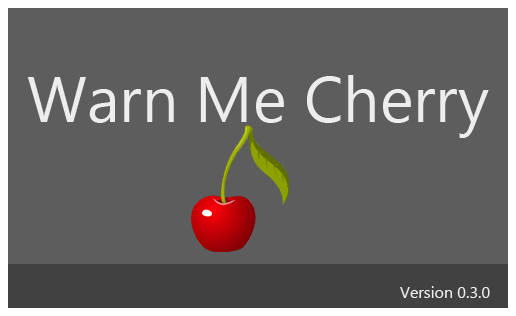
<style>
.page{position:relative;width:516px;height:316px;background:#5d5d5d}
.page>*{position:absolute;margin:0}
.t1{font:64px "SegoeUI";color:#ededed}
.t2{font:16px "SegoeUI";color:#ededed}
</style>
<div class="page">
<p class="t1" style="left:27px;top:75px;width:462px;height:63px">Warn Me Cherry</p>
<p class="t2" style="left:400px;top:286px;width:90px;height:12px">Version 0.3.0</p>
</div>
